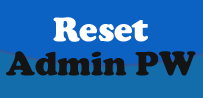
<style>
.page{position:relative;width:203px;height:98px;background:#0b62c3}
.page>*{position:absolute;margin:0}
.t1{font:34.7px/34.7px "CooperBlack";color:#151414}
.t2{font:34.7px/34.7px "CooperBlack";color:#ffffff}
</style>
<div class="page">
<p class="t1" style="left:6px;top:17px;width:190px;height:59px;text-align:center"><span class="t2">Reset<br></span>Admin PW</p>
</div>
